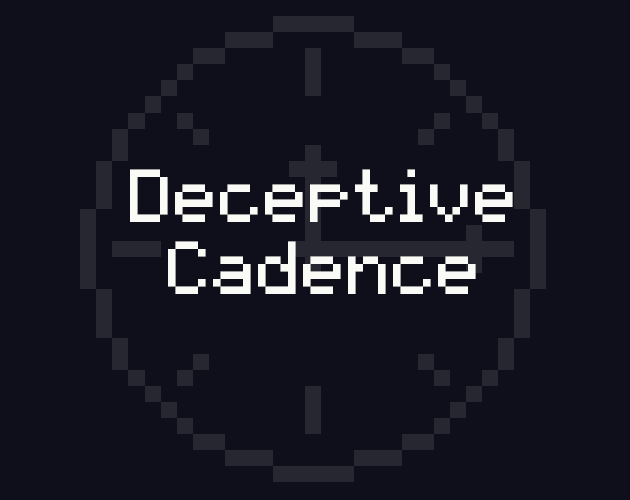
<style>
.page{position:relative;width:630px;height:500px;background:#0f0f1b}
.page>*{position:absolute;margin:0}
.t1{font:60px "pixelmix";color:#fafbf6}
</style>
<div class="page">
<p class="t1" style="left:130px;top:169px;width:383px;height:125px;text-align:center">Deceptive<br>Cadence</p>
</div>
